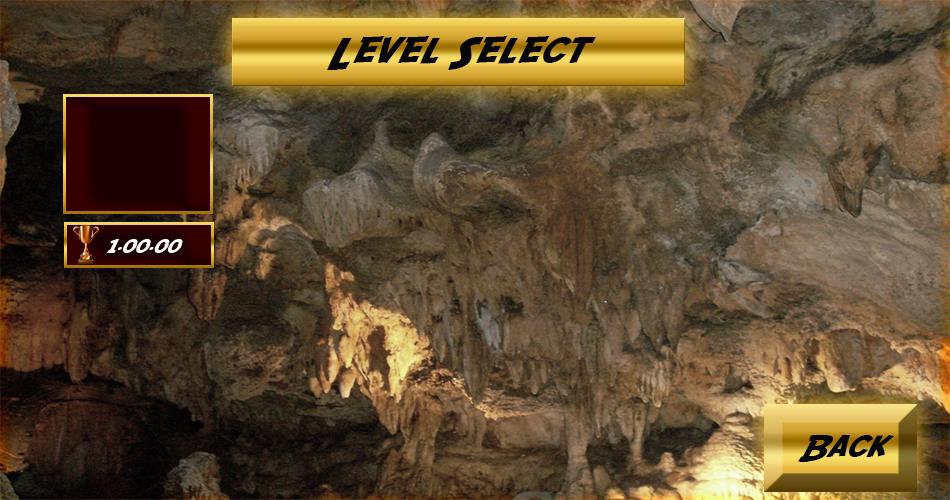
<style>
.page{position:relative;width:950px;height:500px}
.page>*{position:absolute;margin:0}
.t1{font:36px "SFFedora";letter-spacing:-0.005em;color:#060606;scale:1.2 1}
.t2{font:30px "SFFedora";letter-spacing:-0.005em;color:#060606;scale:1.2 1}
</style>
<div class="page">
<p class="t1" style="left:327px;top:36px;width:269px;height:34px">Level Select</p>
<p class="t2" style="left:797px;top:435px;width:98px;height:27px">Back</p>
</div>
